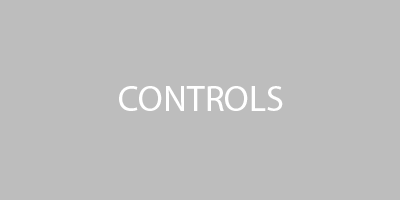
<style>
.page{position:relative;width:400px;height:200px;background:#bdbdbd}
.page>*{position:absolute;margin:0}
.t1{font:36px "MyriadPro-Regular";color:#ffffff}
</style>
<div class="page">
<p class="t1" style="left:119px;top:86px;width:164px;height:25px">CONTROLS</p>
</div>
